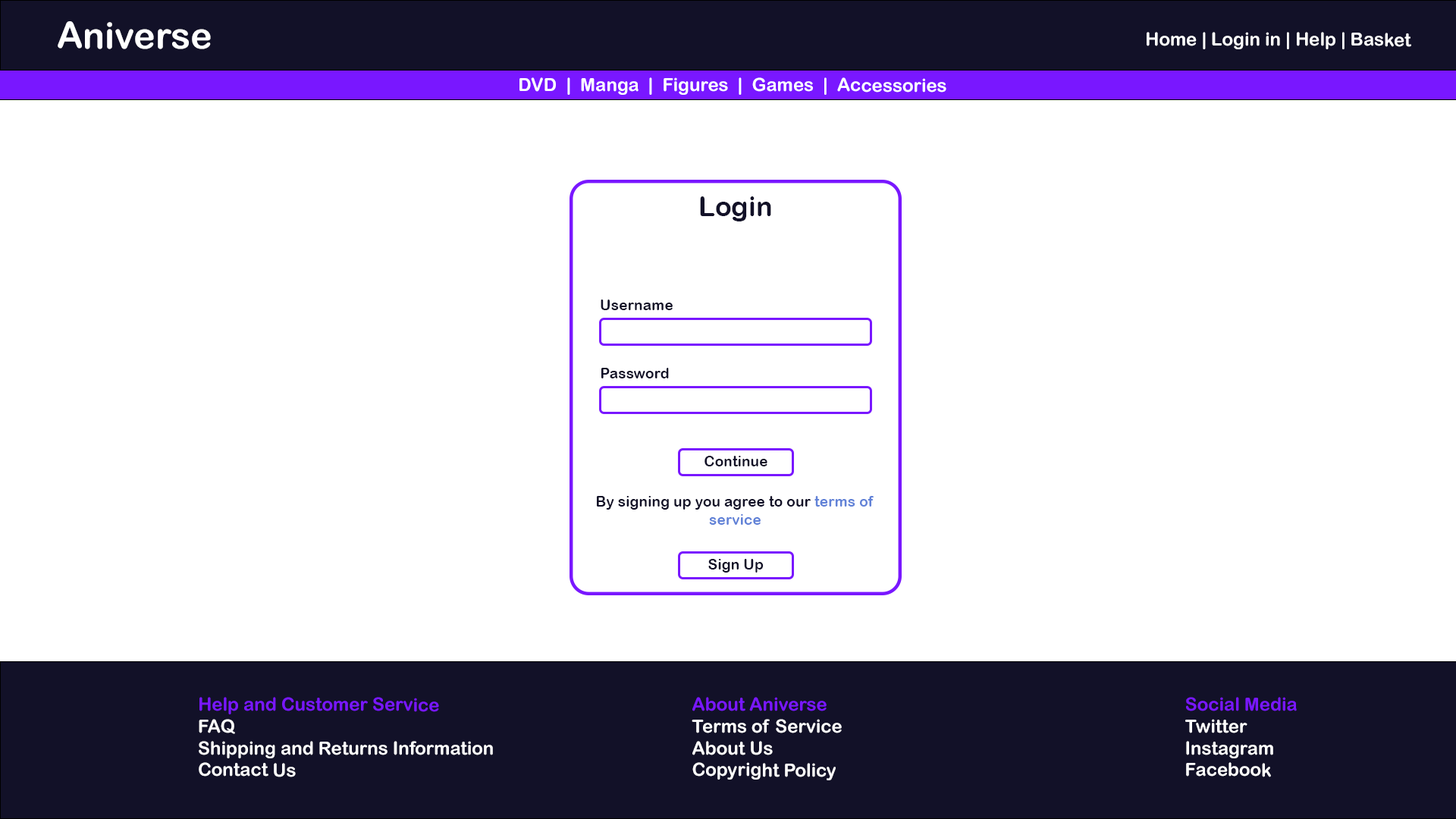
<style>
.page{position:relative;width:1456px;height:819px;background:#ffffff}
.page>*{position:absolute;margin:0}
.t1{font:36.4px "ArialRoundedMTBold";color:#ffffff}
.t2{font:18.2px "ArialRoundedMTBold";color:#ffffff}
.t3{font:27.3px "ArialRoundedMTBold";color:#121128}
.t4{font:14.7px "ArialRoundedMTBold";color:#121128}
.t5{font:14.6px "ArialRoundedMTBold";color:#121128}
.t6{font:14.6px "ArialRoundedMTBold";color:#6182d7}
.t7{font:18.2px "ArialRoundedMTBold";color:#7917ff}
</style>
<div class="page">
<p class="t1" style="left:58px;top:21px;width:153px;height:28px">Aniverse</p>
<p class="t2" style="left:1147px;top:32px;width:264px;height:17px">Home | Login in | Help | Basket</p>
<p class="t2" style="left:519px;top:77px;width:427px;height:18px">DVD  |  Manga  |  Figures  |  Games  |  Accessories</p>
<p class="t3" style="left:700px;top:196px;width:71px;height:25px">Login</p>
<p class="t4" style="left:601px;top:300px;width:72px;height:10px">Username</p>
<p class="t4" style="left:601px;top:368px;width:68px;height:10px">Password</p>
<p class="t4" style="left:704px;top:456px;width:63px;height:10px">Continue</p>
<p class="t5" style="left:597px;top:496px;width:277px;height:29px;text-align:center">By signing up you agree to our <span class="t6">terms of service</span></p>
<p class="t5" style="left:708px;top:559px;width:56px;height:14px">Sign Up</p>
<p class="t2" style="left:199px;top:697px;width:294px;height:80px"><span class="t7">Help and Customer Service<br></span>FAQ<br>Shipping and Returns Information<br>Contact Us</p>
<p class="t2" style="left:692px;top:697px;width:150px;height:83px"><span class="t7">About Aniverse<br></span>Terms of Service<br>About Us<br>Copyright Policy</p>
<p class="t2" style="left:1185px;top:697px;width:112px;height:80px"><span class="t7">Social Media<br></span>Twitter<br>Instagram<br>Facebook</p>
</div>
